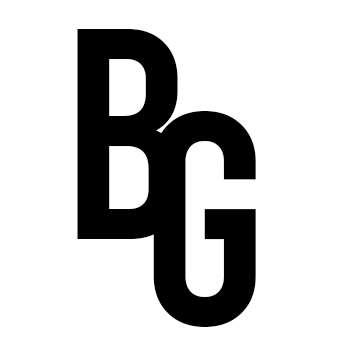
<style>
.page{position:relative;width:342px;height:342px;background:#ffffff}
.page>*{position:absolute;margin:0}
.t1{font:300px "Bebas-Regular";color:#000000}
</style>
<div class="page">
<p class="t1" style="left:77px;top:29px;width:104px;height:210px">B</p>
<p class="t1" style="left:153px;top:111px;width:103px;height:216px">G</p>
</div>
